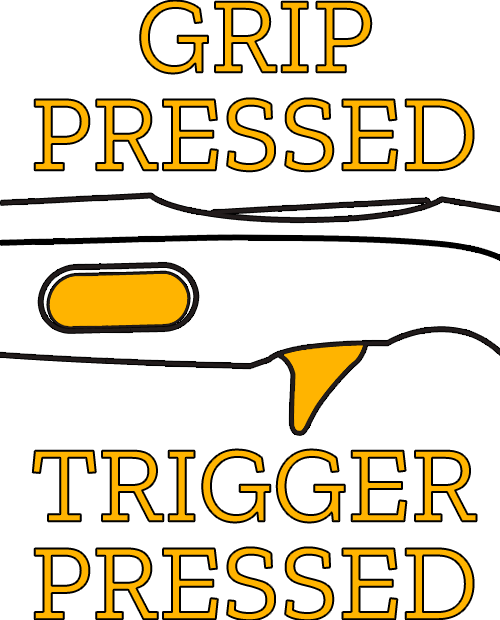
<style>
.page{position:relative;width:500px;height:620px;background:#ffffff}
.page>*{position:absolute;margin:0}
.t1{font:108.3px/97.8px "ZillaSlab-Regular";color:#ffb400}
</style>
<div class="page">
<p class="t1" style="left:34px;top:0px;width:440px;height:172px;text-align:center">GRIP<br>PRESSED</p>
<p class="t1" style="left:32px;top:449px;width:445px;height:172px;text-align:center">TRIGGER<br>PRESSED</p>
</div>
